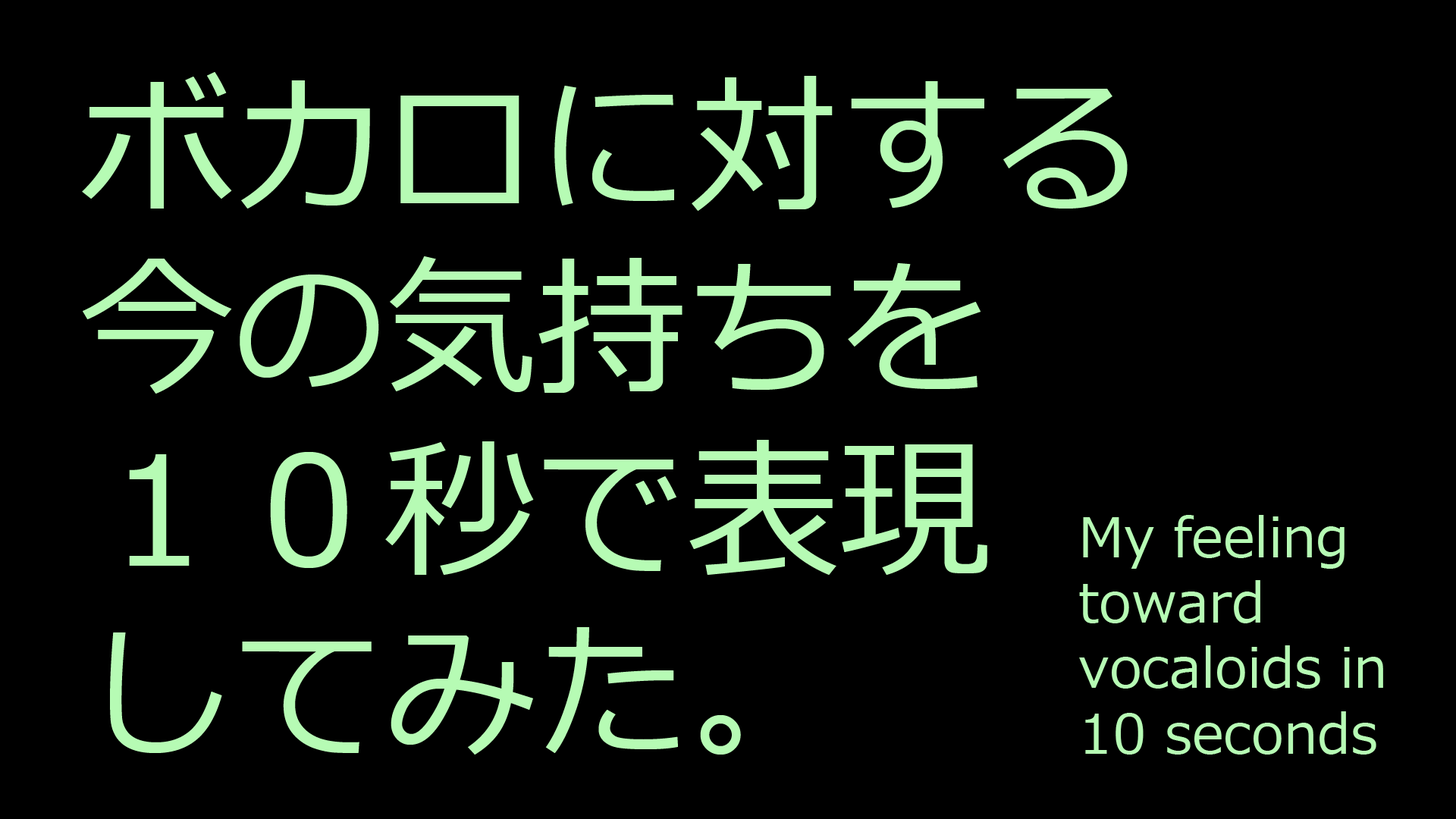
<style>
.page{position:relative;width:1456px;height:819px;background:#000000}
.page>*{position:absolute;margin:0}
.t1{font:151.7px "Meiryo";color:#b6fbb4}
.t2{font:54.6px "Meiryo";color:#b6fbb4}
</style>
<div class="page">
<p class="t1" style="left:82px;top:72px;width:1046px;height:683px">ボカロに対する<br>今の気持ちを<br>１０秒で表現<br>してみた。</p>
<p class="t2" style="left:1079px;top:515px;width:304px;height:240px">My feeling<br>toward<br>vocaloids in<br>10 seconds</p>
</div>
